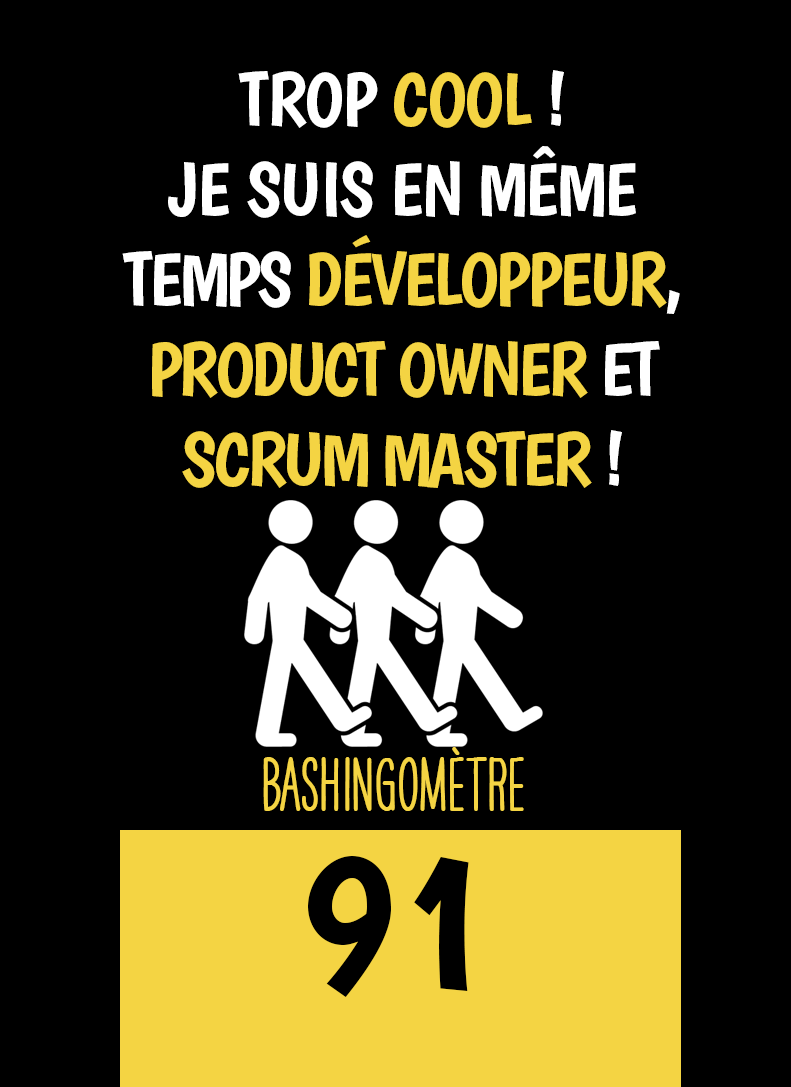
<style>
.page{position:relative;width:791px;height:1087px;background:#000000}
.page>*{position:absolute;margin:0}
.t1{font:75px "Boogaloo-Regular";letter-spacing:-0.02em;color:#ffffff}
.t2{font:75px "Boogaloo-Regular";letter-spacing:-0.02em;color:#f4d443}
.t3{font:75px "Boogaloo-Regular";letter-spacing:-0.04em;color:#ffffff}
.t4{font:75px "Boogaloo-Regular";letter-spacing:-0.04em;color:#f4d443}
.t5{font:66.7px "HAVEANICEDAYTallW04-Bold";color:#f4d443}
.t6{font:200px "Boogaloo-Regular";color:#000000}
</style>
<div class="page">
<p class="t1" style="left:122px;top:70px;width:558px;height:418px;text-align:center">TROP <span class="t2">COOL </span>!<br>JE SUIS EN MÊME <span class="t3">TEMPS </span><span class="t4">DÉVELOPPEUR</span><span class="t3">,<br></span><span class="t4">PRODUCT OWNER</span><span class="t3"> ET<br></span><span class="t4">SCRUM MASTER</span><span class="t3"> !</span></p>
<p class="t5" style="left:263px;top:747px;width:261px;height:64px">BASHINgomètre</p>
<p class="t6" style="left:308px;top:856px;width:161px;height:141px">91</p>
</div>
